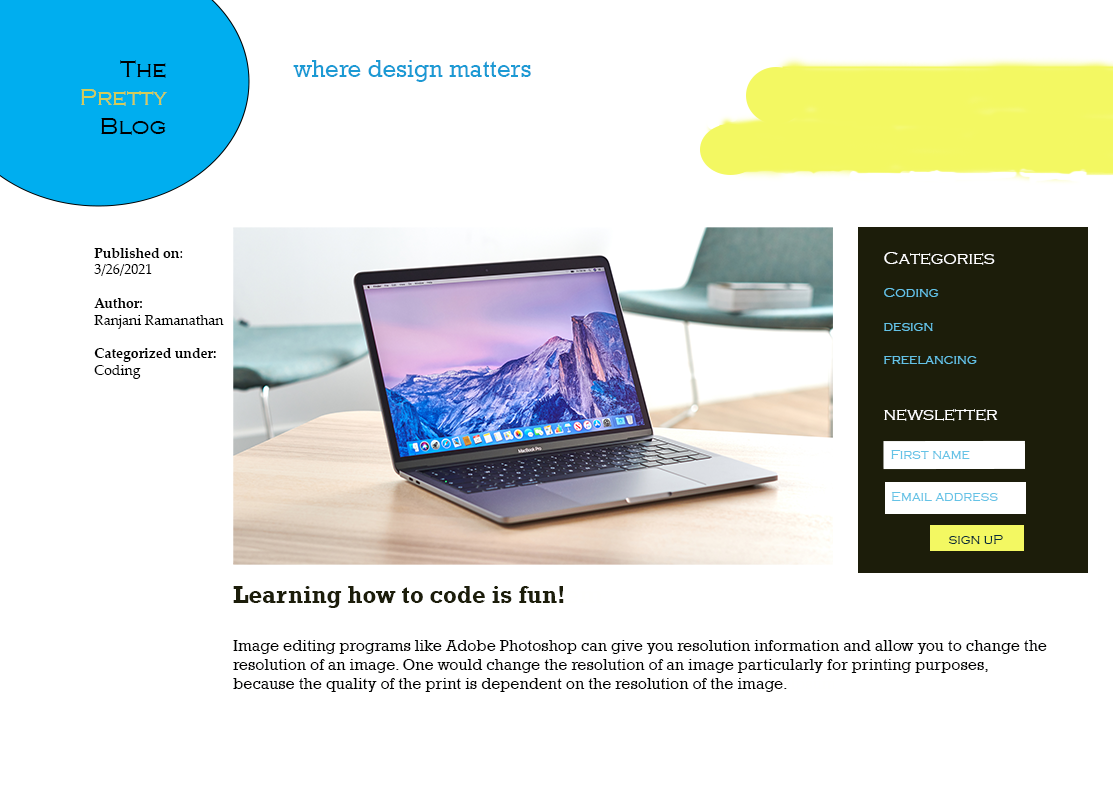
<style>
.page{position:relative;width:1113px;height:792px;background:#ffffff}
.page>*{position:absolute;margin:0}
.t1{font:24px "CopperplateGothic-Light";color:#d5cb58}
.t2{font:24px "CopperplateGothic-Light";color:#000000}
.t3{font:24px "Rockwell";color:#1b9ad4}
.t4{font:14px "PalatinoLinotype-Roman";color:#000000}
.t5{font:14px "PalatinoLinotype-Bold";color:#000000}
.t6{font:14px "CopperplateGothic-Light";color:#65c3e6}
.t7{font:18px "CopperplateGothic-Light";color:#ffffff}
.t8{font:14px "CopperplateGothic-Light";color:#072d3b}
.t9{font:16px "Rockwell";color:#010100}
.t10{font:24px "Rockwell-Bold";color:#1c1d0a}
.t11{font:24px "Rockwell-Bold";color:#fffffe}
.t12{font:16px "Rockwell";color:#fffffe}
</style>
<div class="page">
<p class="t1" style="left:81px;top:60px;width:86px;height:75px;text-align:right"><span class="t2">The<br></span>Pretty<br><span class="t2">Blog</span></p>
<p class="t3" style="left:293px;top:60px;width:238px;height:22px">where design matters</p>
<p class="t4" style="left:94px;top:248px;width:130px;height:131px"><span class="t5">Published on</span>:<br>3/26/2021<br><br><span class="t5">Author:<br></span>Ranjani Ramanathan<br><br><span class="t5">Categorized under:<br></span>Coding</p>
<p class="t6" style="left:884px;top:252px;width:114px;height:169px"><span class="t7">Categories<br><br></span>Coding<br><br>design<br><br>freelancing<br><br><br><span class="t7">newsletter</span></p>
<p class="t6" style="left:891px;top:450px;width:79px;height:9px">First name</p>
<p class="t6" style="left:891px;top:492px;width:107px;height:9px">Email address</p>
<p class="t8" style="left:948px;top:535px;width:55px;height:9px">sign uP</p>
<p class="t9" style="left:233px;top:586px;width:814px;height:106px"><span class="t10">Learning how to code is fun!</span><span class="t11">em<br><br></span>Image editing programs like Adobe Photoshop can give you resolution information and allow you to change the <br>resolution of an image. One would change the resolution of an image particularly for printing purposes,<br>because the quality of the print is dependent on the resolution of the image.<span class="t12"> Ipsum</span></p>
</div>
